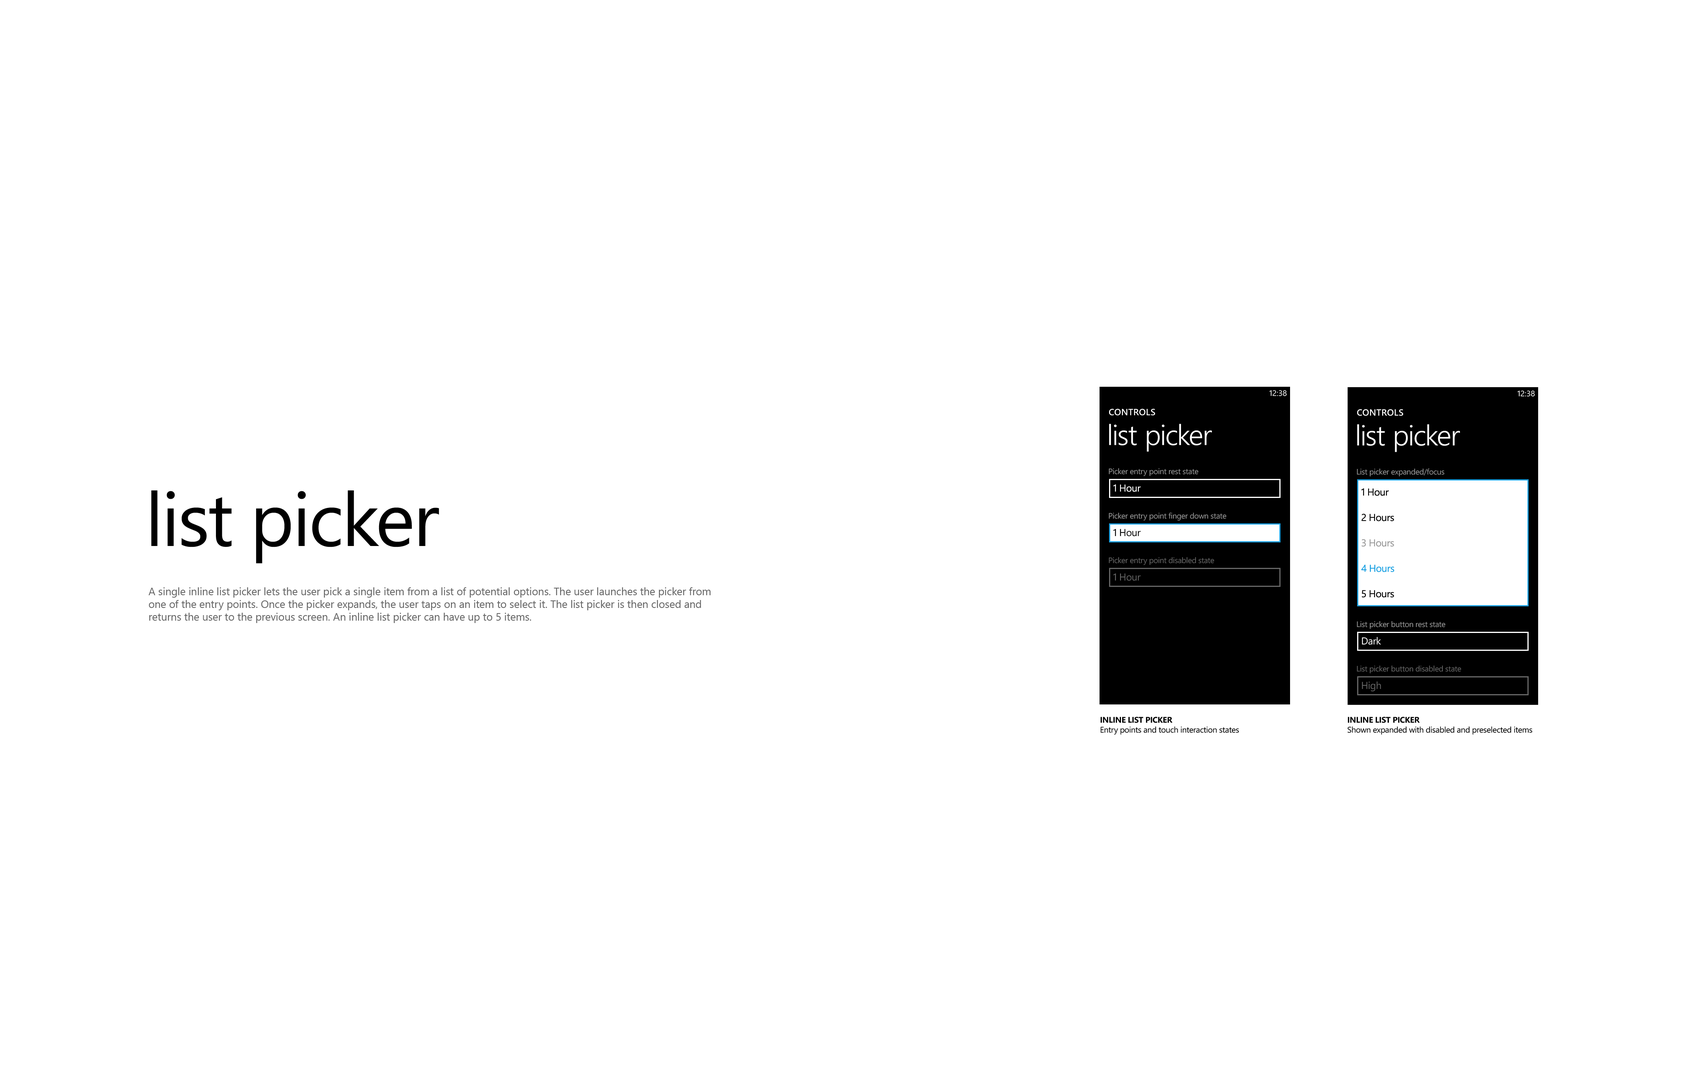
<style>
.page{position:relative;width:1687px;height:1092px;background:#ffffff}
.page>*{position:absolute;margin:0}
.t1{font:7.9px "SegoeWP";color:#ffffff}
.t2{font:9px "SegoeWP-Semibold";letter-spacing:0.025em;color:#ffffff;text-transform:uppercase}
.t3{font:28.6px "SegoeWP-SemiLight";letter-spacing:-0.01em;color:#ffffff}
.t4{font:7.9px "SegoeWP";letter-spacing:-0.025em;color:#999999}
.t5{font:10.1px "SegoeWP";letter-spacing:-0.025em;color:#ffffff}
.t6{font:75.2px "SegoeWP";letter-spacing:-0.025em;color:#000000}
.t7{font:10.1px/25.4px "SegoeWP";letter-spacing:-0.025em;color:#000000}
.t8{font:10.1px/25.4px "SegoeWP";letter-spacing:-0.025em;color:#999999}
.t9{font:10.1px/25.4px "SegoeWP";letter-spacing:-0.025em;color:#1ba1e2}
.t10{font:10.1px "SegoeWP";letter-spacing:-0.025em;color:#000000}
.t11{font:7.9px "SegoeWP";letter-spacing:-0.025em;color:#666666}
.t12{font:10.1px "SegoeWP";letter-spacing:-0.025em;color:#666666}
.t13{font:10.6px "SegoeUI";color:#666666}
.t14{font:8.3px "SegoeWP";letter-spacing:-0.025em;color:#000000}
.t15{font:8.3px "SegoeWP-Bold";letter-spacing:-0.025em;color:#000000;text-transform:uppercase}
</style>
<div class="page">
<p class="t1" style="left:1270px;top:390px;width:17px;height:6px">12:38</p>
<p class="t1" style="left:1518px;top:390px;width:17px;height:7px">12:38</p>
<p class="t2" style="left:1109px;top:409px;width:46px;height:6px">controls</p>
<p class="t2" style="left:1358px;top:409px;width:46px;height:7px">controls</p>
<p class="t3" style="left:1109px;top:424px;width:103px;height:28px">list picker</p>
<p class="t3" style="left:1358px;top:424px;width:102px;height:28px">list picker</p>
<p class="t4" style="left:1109px;top:468px;width:90px;height:8px">Picker entry point rest state</p>
<p class="t4" style="left:1357px;top:468px;width:88px;height:8px">List picker expanded/focus</p>
<p class="t5" style="left:1114px;top:484px;width:27px;height:8px">1 Hour</p>
<p class="t6" style="left:151px;top:490px;width:288px;height:73px">list picker</p>
<p class="t7" style="left:1362px;top:488px;width:33px;height:110px">1 Hour<br>2 Hours<br><span class="t8">3 Hours<br></span><span class="t9">4 Hours<br></span>5 Hours</p>
<p class="t4" style="left:1109px;top:512px;width:118px;height:9px">Picker entry point finger down state</p>
<p class="t10" style="left:1114px;top:529px;width:27px;height:7px">1 Hour</p>
<p class="t11" style="left:1109px;top:557px;width:106px;height:8px">Picker entry point disabled state</p>
<p class="t12" style="left:1114px;top:573px;width:27px;height:8px">1 Hour</p>
<p class="t13" style="left:148px;top:587px;width:563px;height:36px">A single inline list picker lets the user pick a single item from a list of potential options. The user launches the picker from one of the entry points. Once the picker expands, the user taps on an item to select it. The list picker is then closed and returns the user to the previous screen. An inline list picker can have up to 5 items.</p>
<p class="t4" style="left:1357px;top:621px;width:89px;height:8px">List picker button rest state</p>
<p class="t5" style="left:1362px;top:637px;width:19px;height:8px">Dark</p>
<p class="t11" style="left:1357px;top:665px;width:105px;height:8px">List picker button disabled state</p>
<p class="t12" style="left:1362px;top:681px;width:19px;height:10px">High</p>
<p class="t14" style="left:1101px;top:717px;width:138px;height:18px"><span class="t15">INLINE LIST PICKER<br></span>Entry points and touch interaction states</p>
<p class="t14" style="left:1348px;top:717px;width:185px;height:18px"><span class="t15">inline list picker<br></span>Shown expanded with disabled and preselected items</p>
</div>
